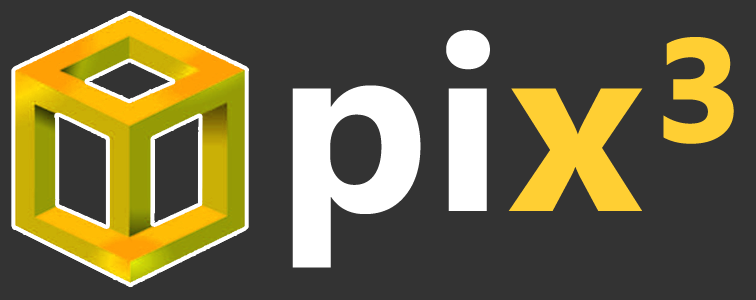
<style>
.page{position:relative;width:756px;height:300px;background:#333333}
.page>*{position:absolute;margin:0}
.t1{font:245px "Gadugi-Bold";letter-spacing:0.02em;color:#ffffff}
.t2{font:245px "Gadugi-Bold";letter-spacing:0.02em;color:#ffcf33}
</style>
<div class="page">
<p class="t1" style="left:292px;top:30px;width:442px;height:238px">pi<span class="t2">x³</span></p>
</div>
